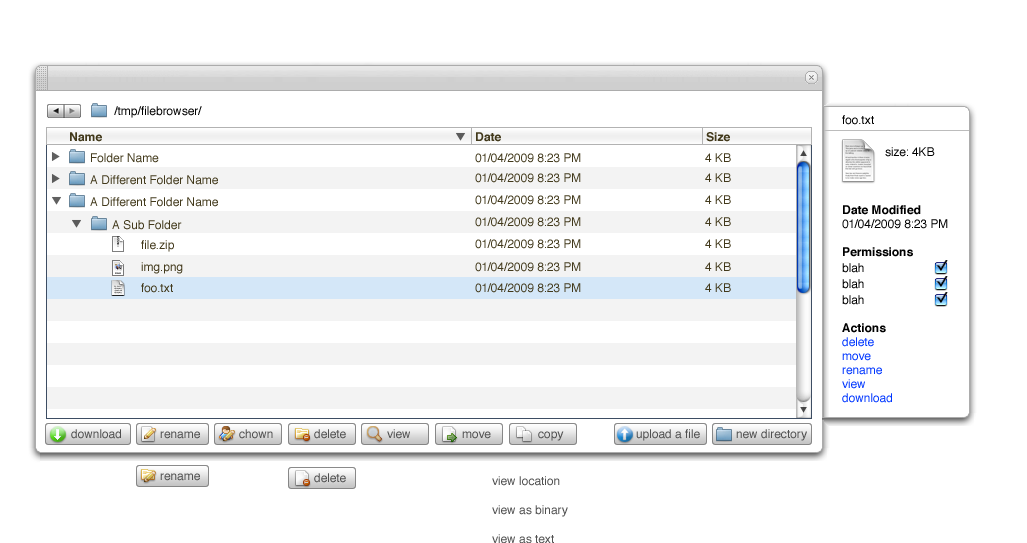
<style>
.page{position:relative;width:1027px;height:543px;background:#ffffff}
.page>*{position:absolute;margin:0}
.t1{font:12px "Helvetica";color:#000000}
.t2{font:12px "Helvetica-Bold";color:#42391b}
.t3{font:12px "Helvetica";color:#42391b}
.t4{font:12px/14px "Helvetica";color:#0036ff}
.t5{font:12px/14px "Helvetica-Bold";color:#000000}
.t6{font:12px/14px "Helvetica";color:#000000}
.t7{font:12px/16px "Helvetica";color:#000000}
.t8{font:12px "Helvetica";color:#505050}
</style>
<div class="page">
<p class="t1" style="left:114px;top:106px;width:88px;height:12px">/tmp/filebrowser/</p>
<p class="t1" style="left:842px;top:115px;width:32px;height:10px">foo.txt</p>
<p class="t2" style="left:70px;top:132px;width:32px;height:10px">Name</p>
<p class="t2" style="left:476px;top:132px;width:25px;height:10px">Date</p>
<p class="t2" style="left:706px;top:132px;width:24px;height:10px">Size</p>
<p class="t1" style="left:885px;top:147px;width:50px;height:10px">size: 4KB</p>
<p class="t3" style="left:91px;top:153px;width:68px;height:10px">Folder Name</p>
<p class="t3" style="left:475px;top:153px;width:106px;height:10px">01/04/2009 8:23 PM</p>
<p class="t3" style="left:705px;top:153px;width:26px;height:9px">4 KB</p>
<p class="t3" style="left:475px;top:173px;width:106px;height:10px">01/04/2009 8:23 PM</p>
<p class="t3" style="left:705px;top:173px;width:26px;height:9px">4 KB</p>
<p class="t3" style="left:90px;top:175px;width:128px;height:10px">A Different Folder Name</p>
<p class="t3" style="left:90px;top:197px;width:128px;height:10px">A Different Folder Name</p>
<p class="t3" style="left:475px;top:195px;width:106px;height:10px">01/04/2009 8:23 PM</p>
<p class="t3" style="left:705px;top:195px;width:26px;height:9px">4 KB</p>
<p class="t4" style="left:842px;top:205px;width:106px;height:198px"><span class="t5">Date Modified<br></span><span class="t6">01/04/2009 8:23 PM<br></span><span class="t5"><br>Permissions<br></span><span class="t7">blah<br>blah<br>blah<br><br></span><span class="t5">Actions<br></span>delete<br>move<br>rename<br>view<br>download</p>
<p class="t3" style="left:112px;top:220px;width:70px;height:10px">A Sub Folder</p>
<p class="t3" style="left:475px;top:217px;width:106px;height:10px">01/04/2009 8:23 PM</p>
<p class="t3" style="left:705px;top:217px;width:26px;height:9px">4 KB</p>
<p class="t3" style="left:141px;top:240px;width:33px;height:12px">file.zip</p>
<p class="t3" style="left:475px;top:239px;width:106px;height:10px">01/04/2009 8:23 PM</p>
<p class="t3" style="left:705px;top:239px;width:26px;height:9px">4 KB</p>
<p class="t3" style="left:141px;top:262px;width:42px;height:12px">img.png</p>
<p class="t3" style="left:475px;top:262px;width:106px;height:10px">01/04/2009 8:23 PM</p>
<p class="t3" style="left:705px;top:262px;width:26px;height:9px">4 KB</p>
<p class="t3" style="left:141px;top:283px;width:32px;height:10px">foo.txt</p>
<p class="t3" style="left:475px;top:283px;width:106px;height:10px">01/04/2009 8:23 PM</p>
<p class="t3" style="left:705px;top:283px;width:26px;height:9px">4 KB</p>
<p class="t8" style="left:71px;top:429px;width:50px;height:10px">download</p>
<p class="t8" style="left:160px;top:431px;width:40px;height:8px">rename</p>
<p class="t8" style="left:239px;top:429px;width:34px;height:10px">chown</p>
<p class="t8" style="left:314px;top:429px;width:32px;height:10px">delete</p>
<p class="t8" style="left:387px;top:429px;width:23px;height:10px">view</p>
<p class="t8" style="left:462px;top:431px;width:29px;height:8px">move</p>
<p class="t8" style="left:538px;top:431px;width:26px;height:10px">copy</p>
<p class="t8" style="left:636px;top:429px;width:64px;height:12px">upload a file</p>
<p class="t8" style="left:736px;top:429px;width:71px;height:12px">new directory</p>
<p class="t8" style="left:160px;top:473px;width:40px;height:8px">rename</p>
<p class="t8" style="left:314px;top:473px;width:32px;height:10px">delete</p>
<p class="t8" style="left:492px;top:476px;width:76px;height:68px">view location<br><br>view as binary<br><br>view as text</p>
</div>
